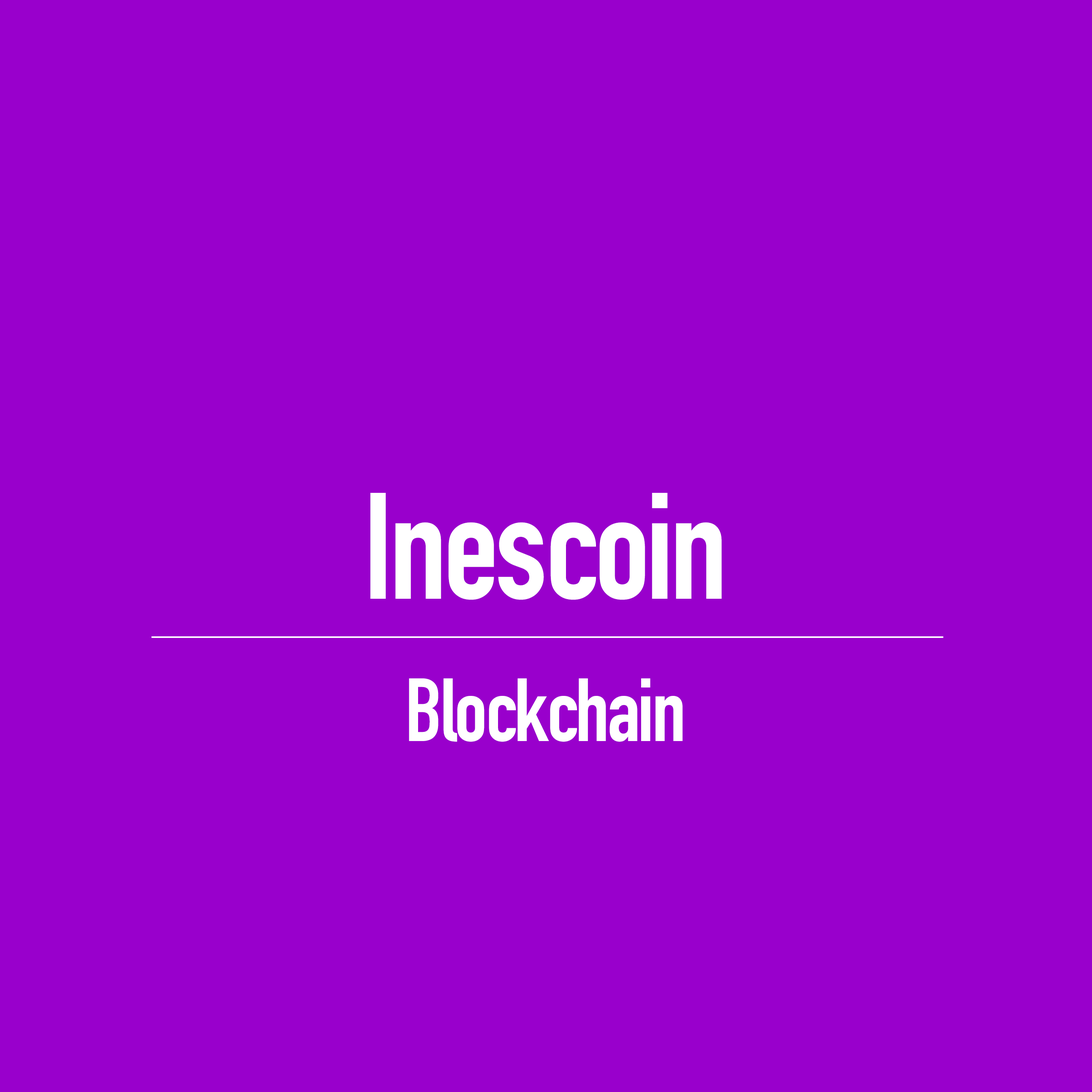
<style>
.page{position:relative;width:1092px;height:1092px;background:#9900cc}
.page>*{position:absolute;margin:0}
.t1{font:148.7px "DINCondensed-Bold";letter-spacing:-0.025em;color:#ffffff}
.t2{font:87.9px "DINCondensed-Bold";letter-spacing:-0.025em;color:#ffffff}
</style>
<div class="page">
<p class="t1" style="left:370px;top:493px;width:352px;height:107px">Inescoin</p>
<p class="t2" style="left:409px;top:678px;width:274px;height:64px">Blockchain</p>
</div>
